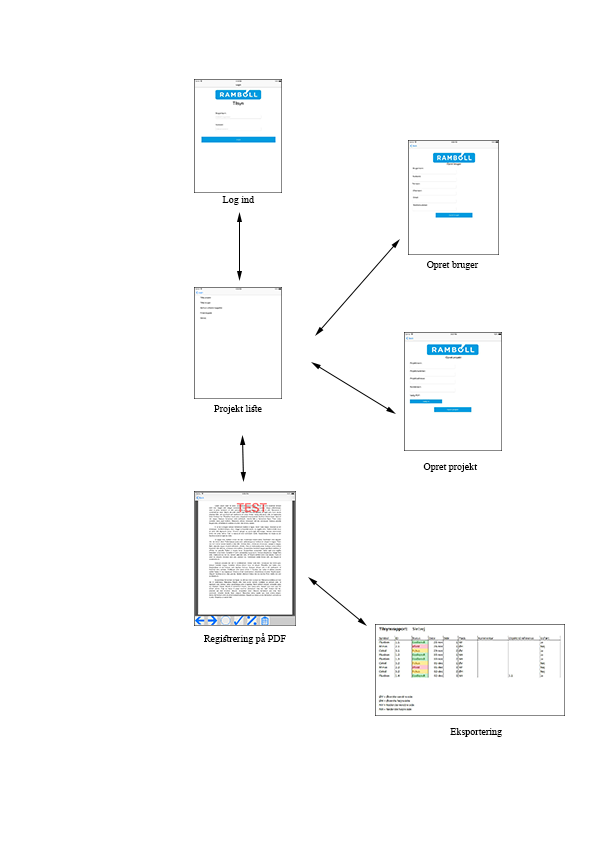
<style>
.page{position:relative;width:595px;height:842px;background:#ffffff}
.page>*{position:absolute;margin:0}
.t1{font:10px "TimesNewRomanPSMT";color:#000000}
</style>
<div class="page">
<p class="t1" style="left:222px;top:196px;width:33px;height:9px">Log ind</p>
<p class="t1" style="left:427px;top:261px;width:52px;height:9px">Opret bruger</p>
<p class="t1" style="left:214px;top:405px;width:48px;height:9px">Projekt liste</p>
<p class="t1" style="left:423px;top:463px;width:55px;height:9px">Opret projekt</p>
<p class="t1" style="left:204px;top:633px;width:82px;height:11px">Registrering på PDF</p>
<p class="t1" style="left:450px;top:728px;width:52px;height:9px">Eksportering</p>
</div>
